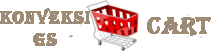
<style>
.page{position:relative;width:224px;height:51px;background:#ffffff}
.page>*{position:absolute;margin:0}
.t1{font:18px "Algerian";color:#9e8b75;font-weight:bold}
.t2{font:24px "Algerian";color:#9e8b75;font-weight:bold}
</style>
<div class="page">
<p class="t1" style="left:0px;top:8px;width:90px;height:38px;text-align:center">Konveksi<br>GS</p>
<p class="t2" style="left:147px;top:17px;width:64px;height:19px">CART</p>
</div>
